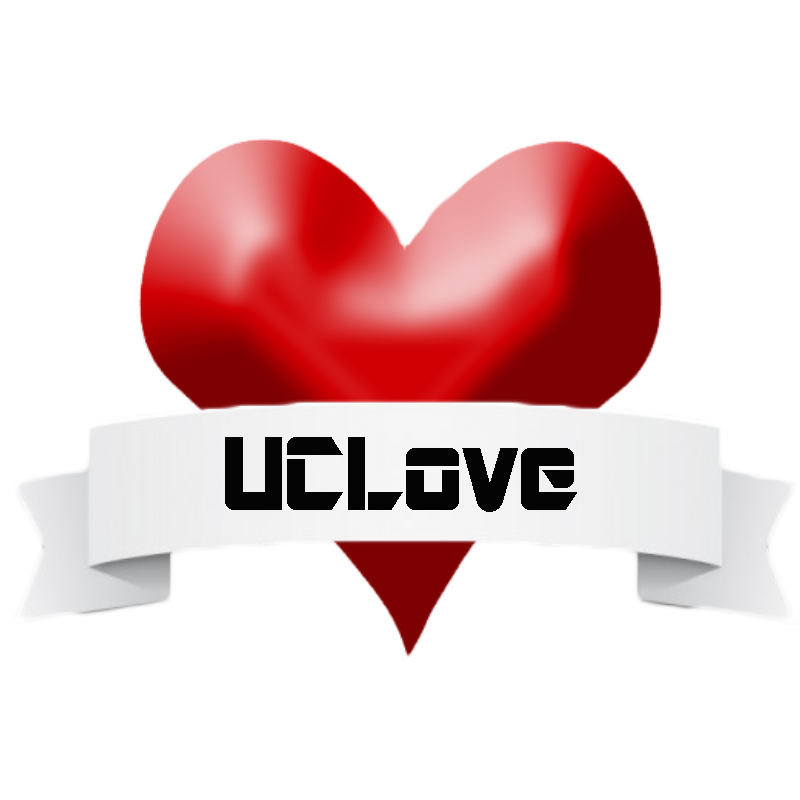
<style>
.page{position:relative;width:800px;height:800px;background:#ffffff}
.page>*{position:absolute;margin:0}
.t1{font:115.9px "ARDESTINE";color:#040404;scale:0.96 1}
</style>
<div class="page">
<p class="t1" style="left:225px;top:437px;width:352px;height:75px">UCLove</p>
</div>
